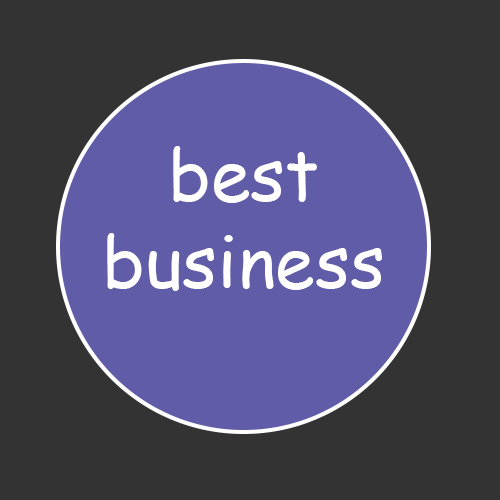
<style>
.page{position:relative;width:500px;height:500px;background:#333333}
.page>*{position:absolute;margin:0}
.t1{font:72px "ComicSansMS";color:#ffffff}
</style>
<div class="page">
<p class="t1" style="left:107px;top:146px;width:275px;height:145px;text-align:center">best<br>business</p>
</div>
